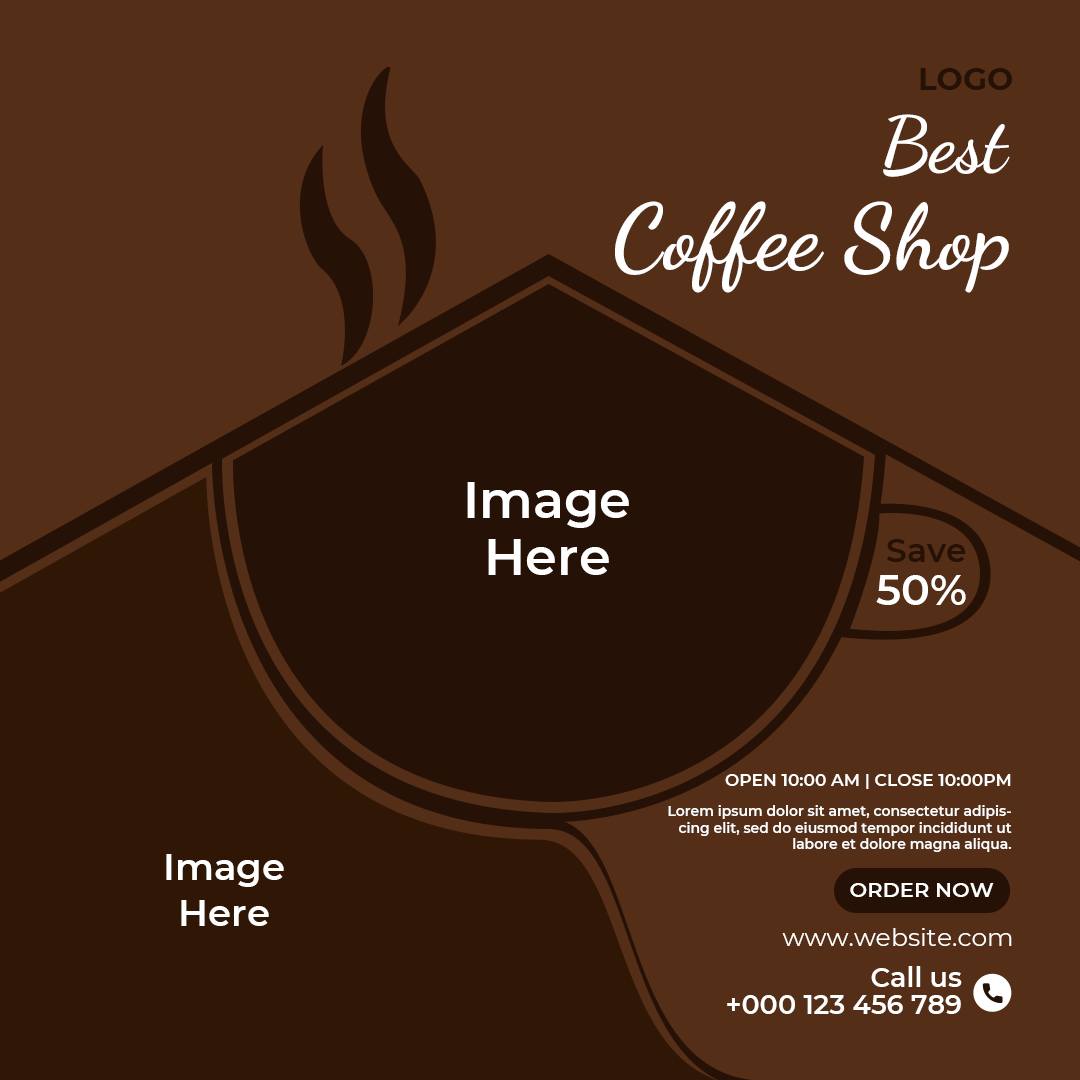
<style>
.page{position:relative;width:1080px;height:1080px;background:#542e17}
.page>*{position:absolute;margin:0}
.t1{font:31px "Montserrat-Bold";color:#251106;text-transform:uppercase}
.t2{font:77px "DancingScript-Bold";color:#ffffff}
.t3{font:91px "DancingScript-Bold";color:#ffffff}
.t4{font:51px "Montserrat-SemiBold";color:#ffffff}
.t5{font:33px "Montserrat-SemiBold";color:#251106}
.t6{font:43px "Montserrat-SemiBold";color:#ffffff}
.t7{font:17px "Montserrat-SemiBold";color:#ffffff;text-transform:uppercase}
.t8{font:13.9px "Montserrat-SemiBold";color:#ffffff}
.t9{font:37px "Montserrat-SemiBold";color:#ffffff}
.t10{font:21px "Montserrat-SemiBold";color:#ffffff;text-transform:uppercase}
.t11{font:25px "Montserrat-Regular";color:#ffffff}
.t12{font:27px "Montserrat-SemiBold";color:#ffffff}
</style>
<div class="page">
<p class="t1" style="left:920px;top:68px;width:92px;height:22px">Logo</p>
<p class="t2" style="left:883px;top:114px;width:127px;height:63px">Best</p>
<p class="t3" style="left:615px;top:201px;width:394px;height:92px">Coffee Shop</p>
<p class="t4" style="left:467px;top:482px;width:162px;height:46px">Image</p>
<p class="t4" style="left:488px;top:539px;width:121px;height:36px">Here</p>
<p class="t5" style="left:887px;top:539px;width:79px;height:23px">Save</p>
<p class="t6" style="left:876px;top:575px;width:90px;height:30px">50%</p>
<p class="t7" style="left:725px;top:774px;width:286px;height:15px">Open 10:00 AM | CLose 10:00PM</p>
<p class="t8" style="left:668px;top:805px;width:344px;height:47px;text-align:right">Lorem ipsum dolor sit amet, consectetur adipiscing elit, sed do eiusmod tempor incididunt ut labore et dolore magna aliqua.</p>
<p class="t9" style="left:166px;top:854px;width:118px;height:33px">Image</p>
<p class="t10" style="left:850px;top:883px;width:144px;height:14px">Order now</p>
<p class="t9" style="left:181px;top:900px;width:88px;height:26px">Here</p>
<p class="t11" style="left:782px;top:928px;width:230px;height:18px">www.website.com</p>
<p class="t12" style="left:871px;top:966px;width:91px;height:21px">Call us</p>
<p class="t12" style="left:727px;top:995px;width:234px;height:19px">+000 123 456 789</p>
</div>
